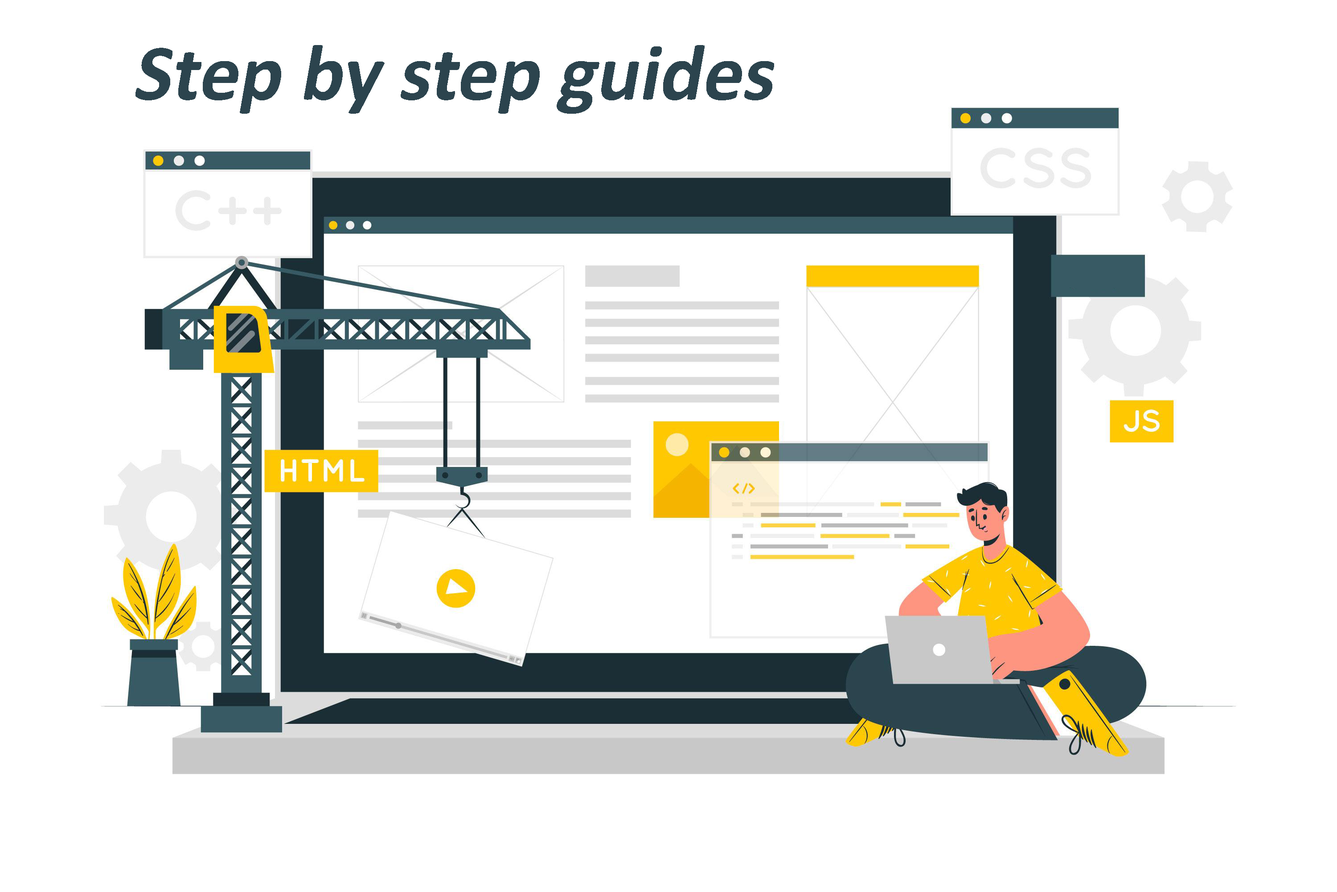
<style>
.page{position:relative;width:1337px;height:892px;background:#ffffff}
.page>*{position:absolute;margin:0}
.t1{font:80.2px "Calibri-Bold";color:#2c444e;font-style:italic}
</style>
<div class="page">
<p class="t1" style="left:136px;top:45px;width:638px;height:69px">Step by step guides</p>
</div>
